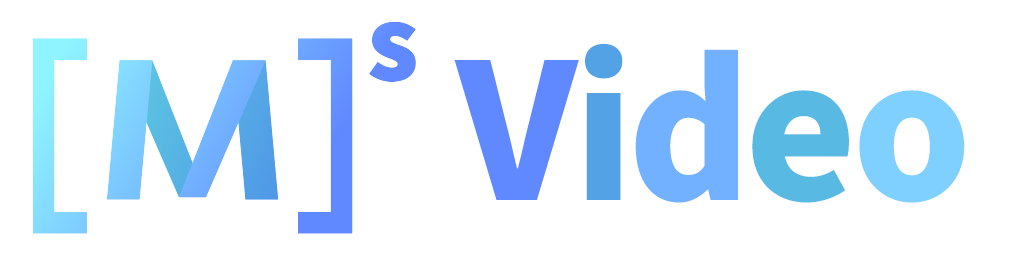
<style>
.page{position:relative;width:1017px;height:263px;background:#ffffff}
.page>*{position:absolute;margin:0}
.t1{font:187.5px "NotoSansSC-Black";color:#6189ff}
.t2{font:187.5px "NotoSansSC-Black";color:#53a2e6}
.t3{font:187.5px "NotoSansSC-Black";color:#72b1ff}
.t4{font:187.5px "NotoSansSC-Black";color:#58b9e3}
.t5{font:187.5px "NotoSansSC-Black";color:#7fd0ff}
</style>
<div class="page">
<p class="t1" style="left:454px;top:43px;width:511px;height:160px">V<span class="t2">i</span><span class="t3">d</span><span class="t4">e</span><span class="t5">o</span></p>
</div>
